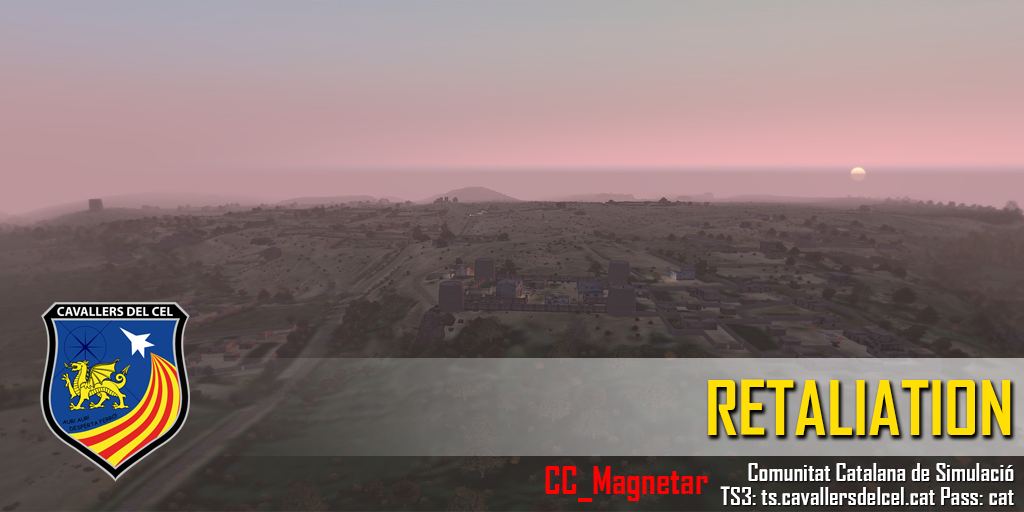
<style>
.page{position:relative;width:1024px;height:512px}
.page>*{position:absolute;margin:0}
.t1{font:72px "AgencyFB-Bold";color:#ffdf06}
.t2{font:24px/24px "AgencyFB-Bold";color:#ffffff}
</style>
<div class="page">
<p class="t1" style="left:708px;top:379px;width:303px;height:56px">RETALIATION</p>
<p class="t2" style="left:720px;top:463px;width:294px;height:42px;text-align:right">Comunitat Catalana de Simulació<br>TS3: ts.cavallersdelcel.cat Pass: cat</p>
</div>
